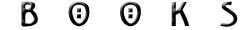
<style>
.page{position:relative;width:250px;height:30px;background:#ffffff}
.page>*{position:absolute;margin:0}
.t1{font:30px "ChelseaStudio";color:#000000}
</style>
<div class="page">
<p class="t1" style="left:21px;top:1px;width:217px;height:26px">B o o k s</p>
</div>
